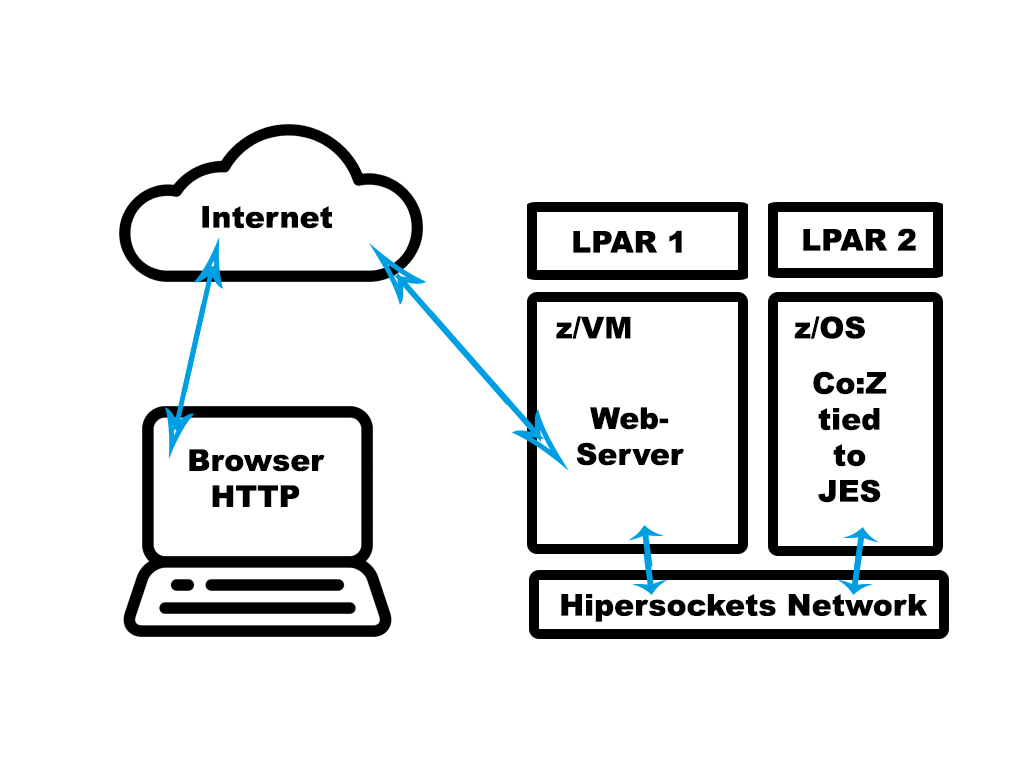
<style>
.page{position:relative;width:1024px;height:768px;background:#ffffff}
.page>*{position:absolute;margin:0}
.t1{font:30px "Arial-Black";color:#000000}
</style>
<div class="page">
<p class="t1" style="left:202px;top:206px;width:131px;height:23px">Internet</p>
<p class="t1" style="left:573px;top:230px;width:109px;height:23px">LPAR 1</p>
<p class="t1" style="left:803px;top:228px;width:113px;height:23px">LPAR 2</p>
<p class="t1" style="left:556px;top:316px;width:75px;height:23px">z/VM</p>
<p class="t1" style="left:794px;top:316px;width:71px;height:23px">z/OS</p>
<p class="t1" style="left:813px;top:371px;width:74px;height:132px;text-align:center">Co:Z<br>tied<br>to<br>JES</p>
<p class="t1" style="left:576px;top:407px;width:108px;height:59px;text-align:center">Web-<br>Server</p>
<p class="t1" style="left:189px;top:449px;width:136px;height:58px;text-align:center">Browser<br>HTTP</p>
<p class="t1" style="left:561px;top:594px;width:367px;height:28px">Hipersockets Network</p>
</div>
